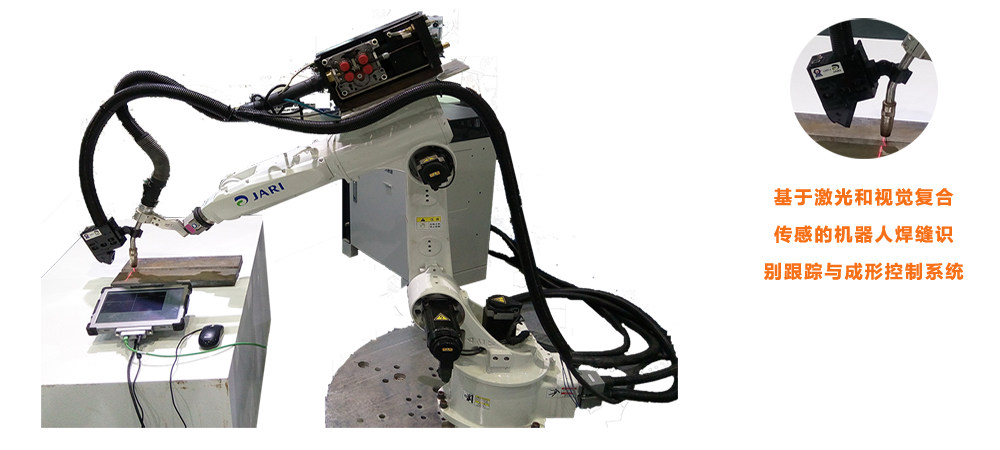
<style>
.page{position:relative;width:1000px;height:450px;background:#ffffff}
.page>*{position:absolute;margin:0}
.t1{font:17.8px/37.2px "MicrosoftYaHei-Bold";letter-spacing:0.12em;color:#f76f17}
</style>
<div class="page">
<p class="t1" style="left:764px;top:188px;width:200px;height:92px;text-align:center">基于激光和视觉复合<br>传感的机器人焊缝识<br>别跟踪与成形控制系统</p>
</div>
